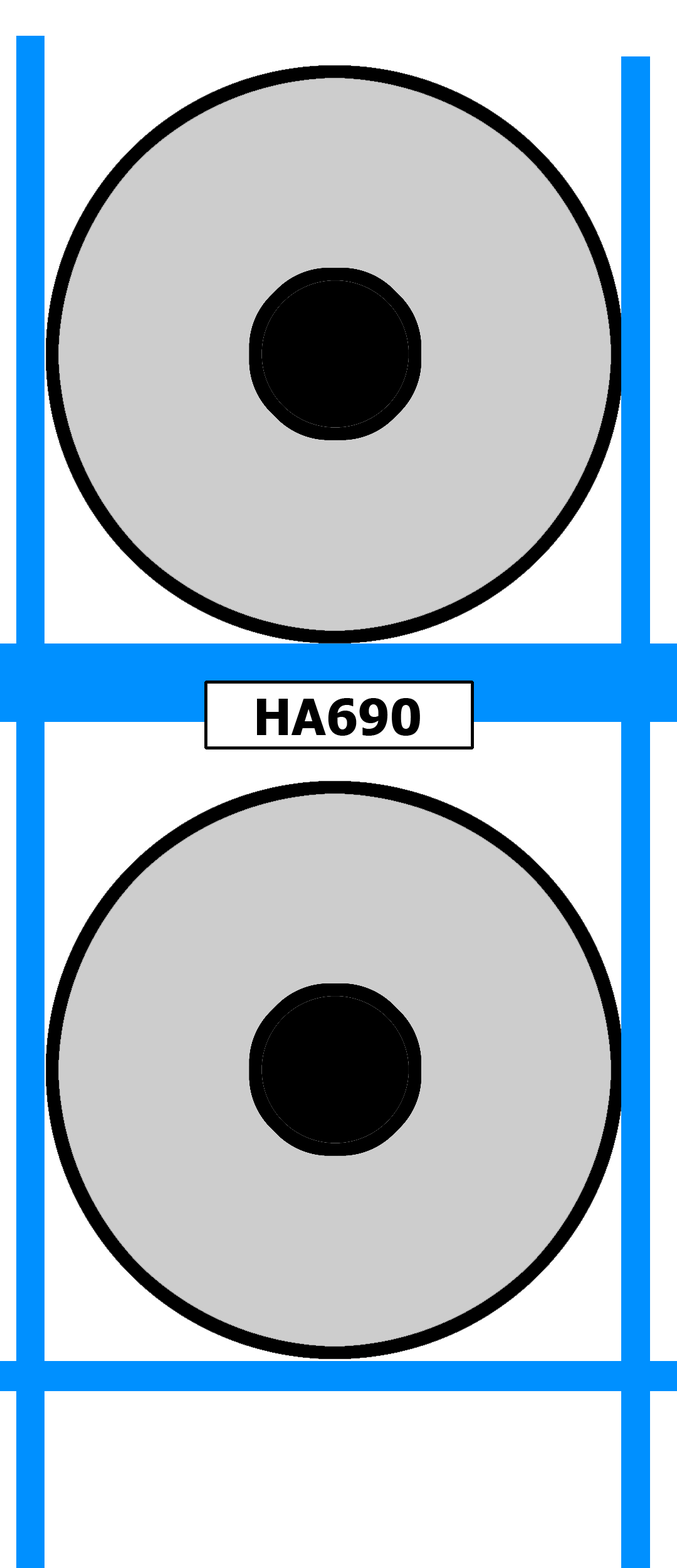
<style>
.page{position:relative;width:677px;height:1568px;background:#cdcdcd}
.page>*{position:absolute;margin:0}
.t1{font:50.2px "Tahoma-Bold";color:#000000}
</style>
<div class="page">
<p class="t1" style="left:257px;top:698px;width:163px;height:38px">HA690</p>
</div>
